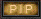
<style>
.page{position:relative;width:41px;height:19px}
.page>*{position:absolute;margin:0}
.t1{font:10.5px "Helvetica-Light";letter-spacing:0.2em;color:#f7cd99;scale:1.11 1}
</style>
<div class="page">
<p class="t1" style="left:10px;top:5px;width:22px;height:8px">PIP</p>
</div>
